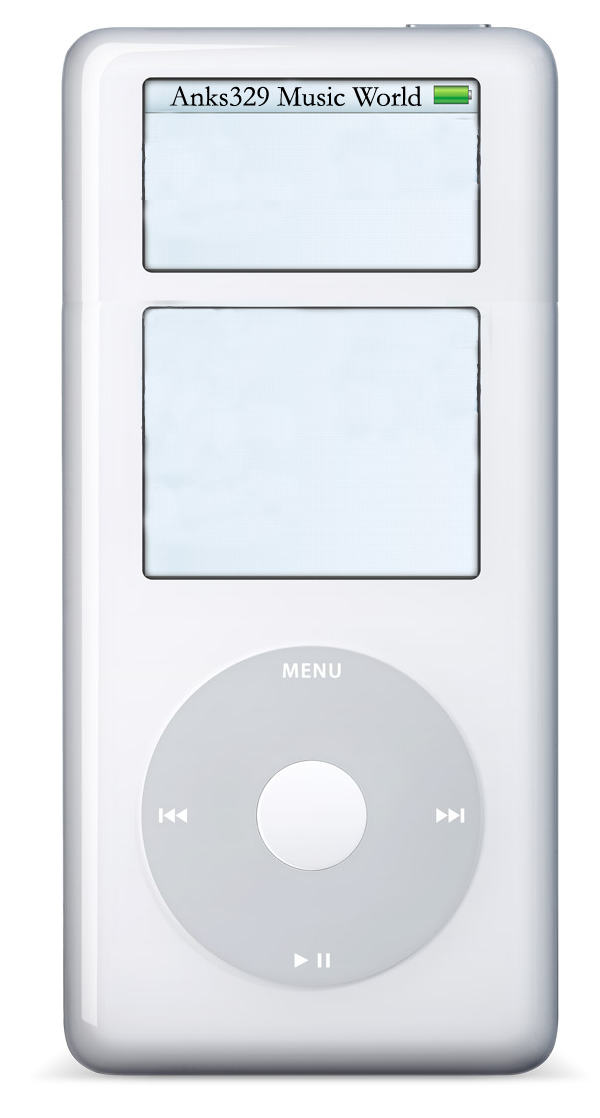
<style>
.page{position:relative;width:600px;height:1118px;background:#ffffff}
.page>*{position:absolute;margin:0}
.t1{font:29.2px "Garamond";color:#000000}
</style>
<div class="page">
<p class="t1" style="left:169px;top:86px;width:253px;height:21px">Anks329 Music World</p>
</div>
